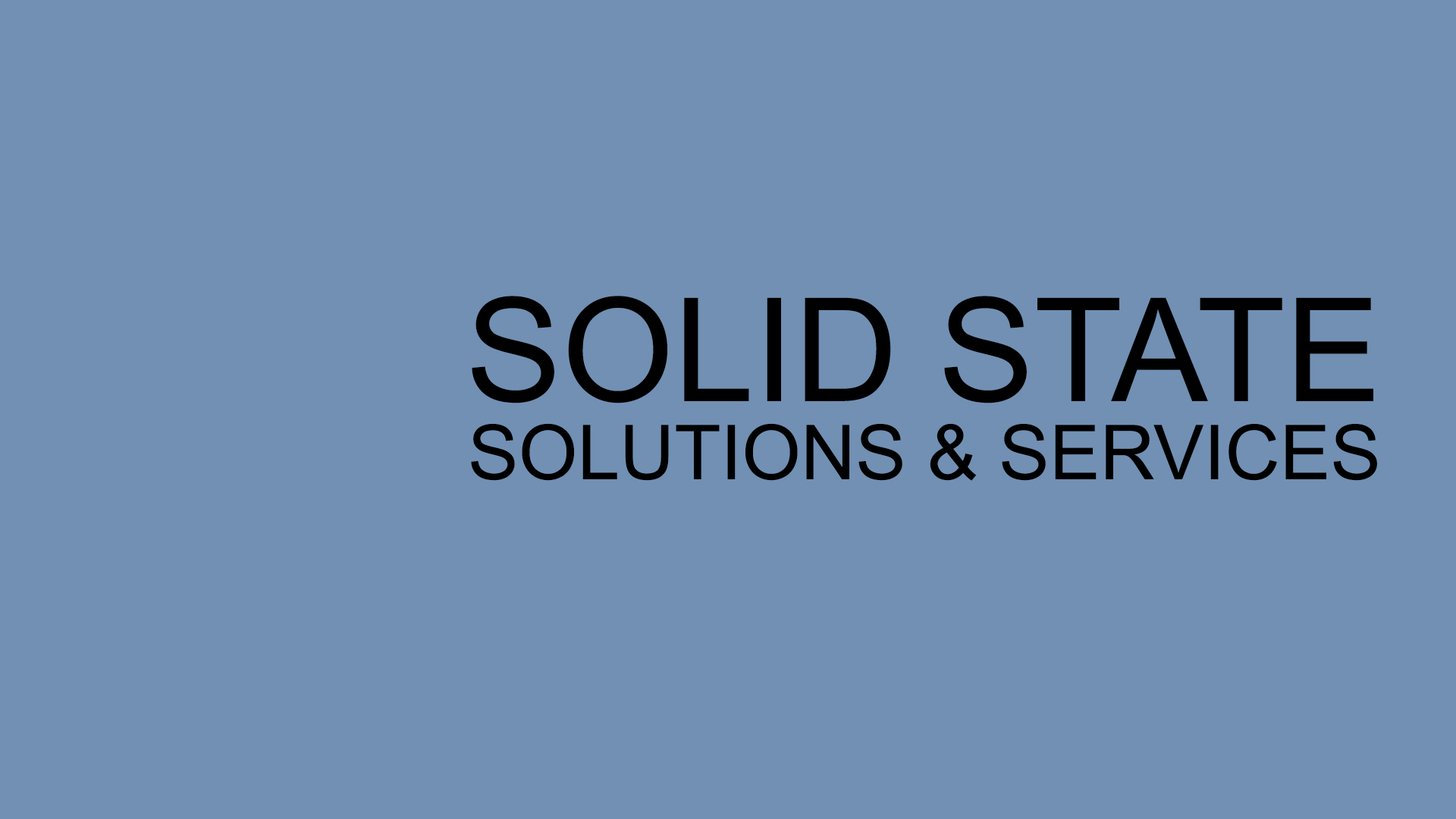
<style>
.page{position:relative;width:1456px;height:819px;background:#7190b3}
.page>*{position:absolute;margin:0}
.t1{font:144.1px "ArialMT";color:#000000}
.t2{font:75.8px "ArialMT";color:#000000}
</style>
<div class="page">
<p class="t1" style="left:472px;top:296px;width:901px;height:107px">SOLID STATE</p>
<p class="t2" style="left:471px;top:423px;width:906px;height:58px">SOLUTIONS &amp; SERVICES</p>
</div>
